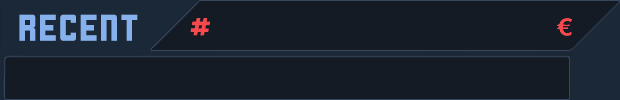
<style>
.page{position:relative;width:620px;height:100px;background:#151b24}
.page>*{position:absolute;margin:0}
.t1{font:36px "Cornerstone";letter-spacing:-0.01em;color:#87b1ec}
</style>
<div class="page">
<p class="t1" style="left:19px;top:14px;width:119px;height:27px">RECEnt</p>
</div>
